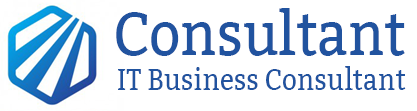
<style>
.page{position:relative;width:417px;height:111px;background:#ffffff}
.page>*{position:absolute;margin:0}
.t1{font:61px "Bitter-Regular";color:#21539f;scale:0.9 1}
.t2{font:29.6px "Bitter-Regular";color:#21539f;scale:0.89 1}
</style>
<div class="page">
<p class="t1" style="left:116px;top:8px;width:289px;height:48px">Consultant</p>
<p class="t2" style="left:118px;top:66px;width:288px;height:24px">IT Business Consultant</p>
</div>
